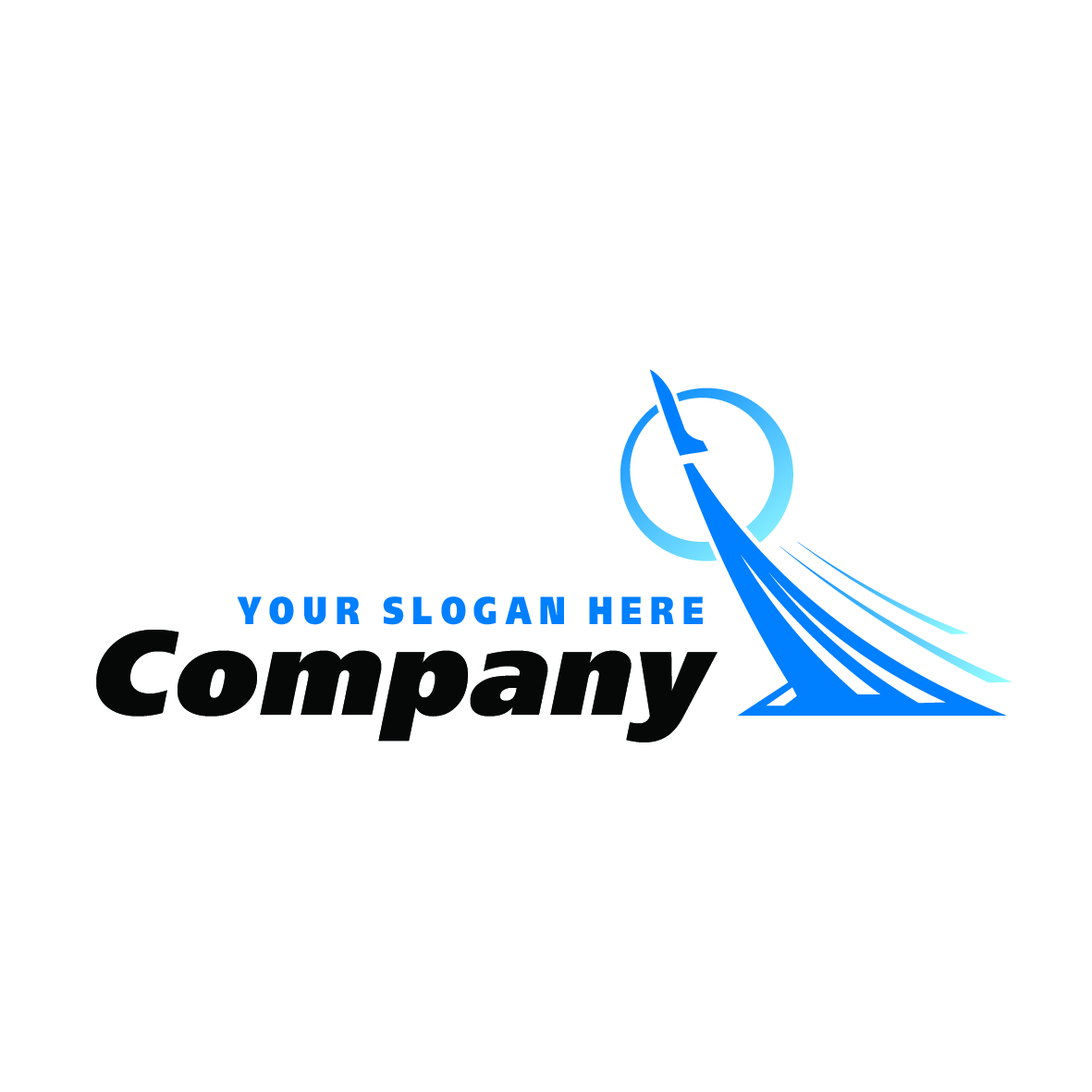
<style>
.page{position:relative;width:1092px;height:1092px;background:#ffffff}
.page>*{position:absolute;margin:0}
.t1{font:38.5px "font181";letter-spacing:0.2em;color:#007fff;scale:0.8 1}
.t2{font:119.4px "font182";letter-spacing:0.01em;color:#060808}
</style>
<div class="page">
<p class="t1" style="left:237px;top:596px;width:466px;height:29px">YOUR SLOGAN HERE</p>
<p class="t2" style="left:96px;top:630px;width:622px;height:112px">Company</p>
</div>
